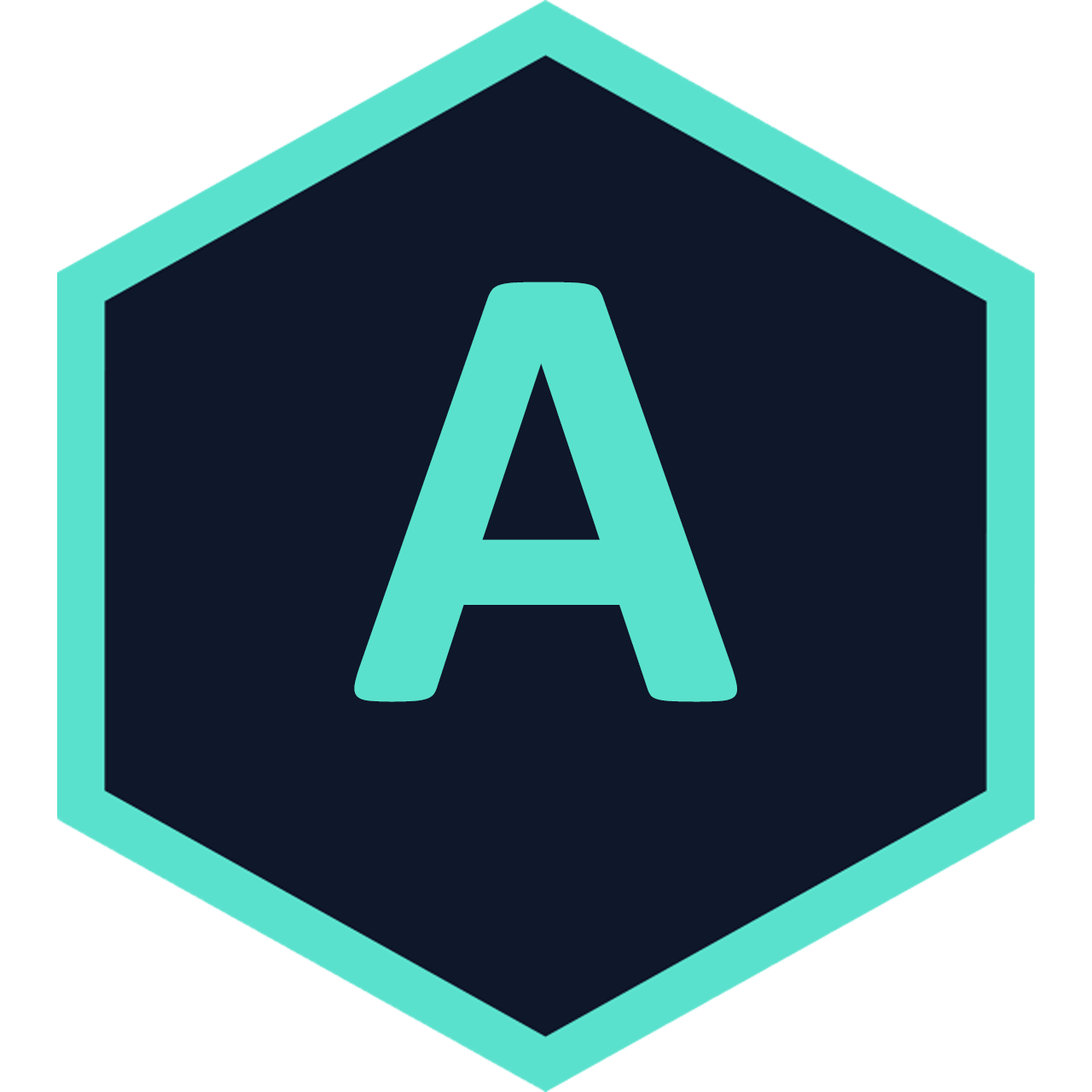
<style>
.page{position:relative;width:1092px;height:1092px;background:#0f172a}
.page>*{position:absolute;margin:0}
.t1{font:657.4px "Calibri-Bold";color:#5ae1cd}
</style>
<div class="page">
<p class="t1" style="left:354px;top:282px;width:383px;height:420px">A</p>
</div>
